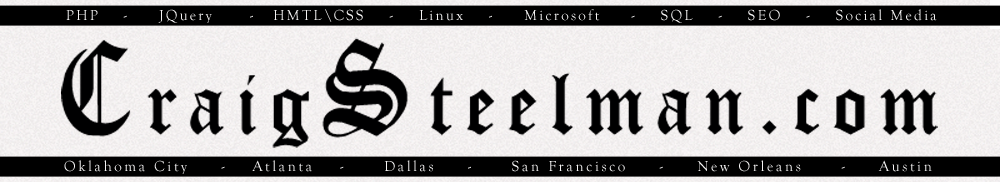
<style>
.page{position:relative;width:1000px;height:182px;background:#000000}
.page>*{position:absolute;margin:0}
.t1{font:15px "GoudyOldStyleT-Regular";letter-spacing:0.15em;color:#f4f3f3}
.t2{font:90px "CloisterBlack-Light";letter-spacing:0.12em;color:#000001}
.t3{font:138px "CloisterBlack-Light";letter-spacing:0.12em;color:#000001;scale:0.83 1}
.t4{font:15px "GoudyOldStyleT-Regular";letter-spacing:0.175em;color:#f4f3f3}
</style>
<div class="page">
<p class="t1" style="left:66px;top:9px;width:871px;height:14px">PHP    -     JQuery      -   HMTL\CSS    -    Linux    -     Microsoft     -    SQL    -    SEO    -    Social Media</p>
<p class="t2" style="left:61px;top:37px;width:877px;height:111px"><span class="t3">C</span>raig<span class="t3">S</span>teelman.com</p>
<p class="t4" style="left:64px;top:160px;width:868px;height:14px">Oklahoma City     -    Atlanta    -      Dallas     -      San Francisco     -     New Orleans      -     Austin</p>
</div>
